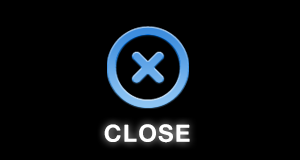
<style>
.page{position:relative;width:300px;height:160px;background:#000000}
.page>*{position:absolute;margin:0}
.t1{font:24px "AlteHaasGrotesk_Bold";letter-spacing:0.05em;color:#ffffff}
</style>
<div class="page">
<p class="t1" style="left:104px;top:124px;width:86px;height:19px">CLOSE</p>
</div>
